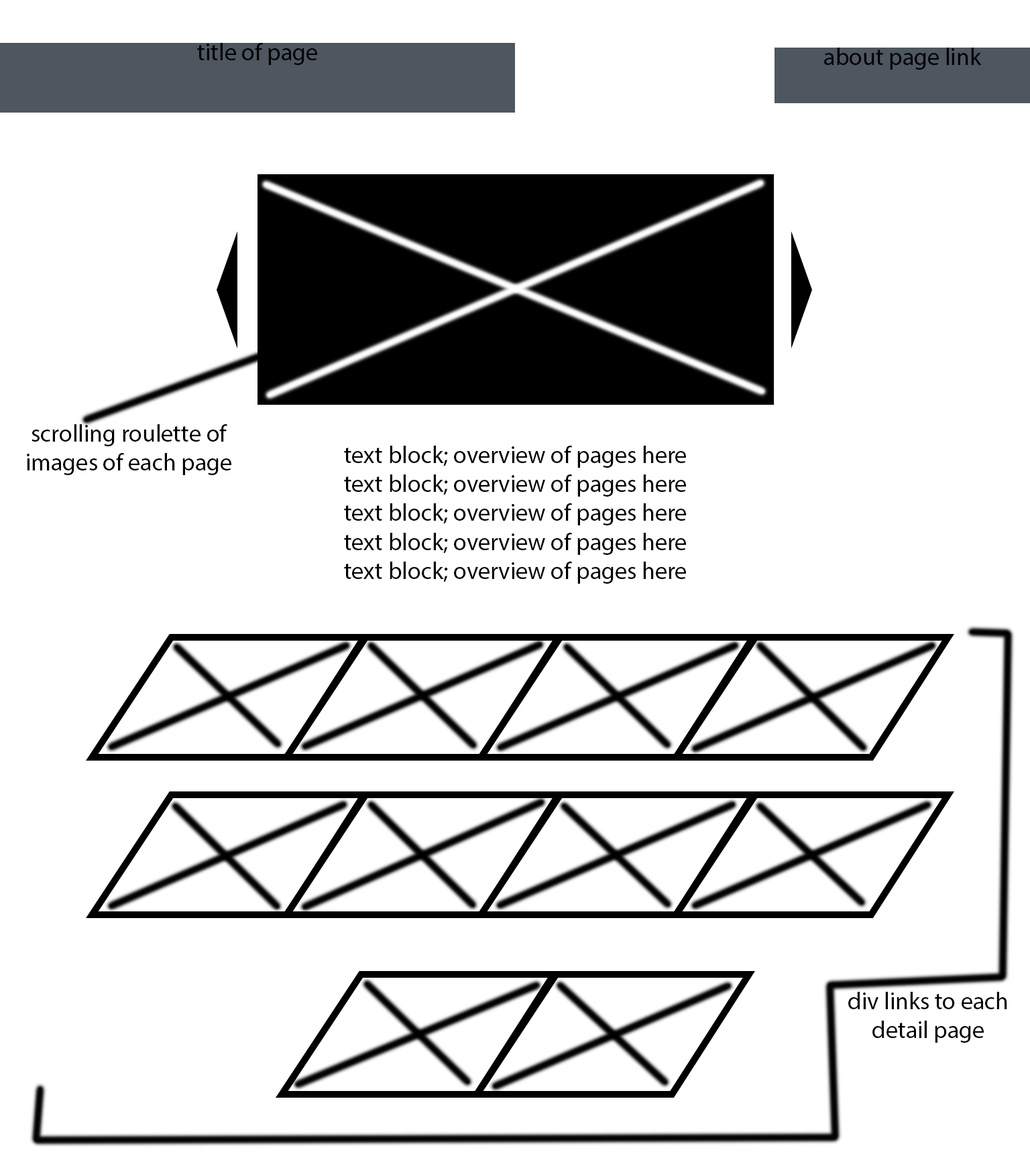
<style>
.page{position:relative;width:1030px;height:1158px;background:#ffffff}
.page>*{position:absolute;margin:0}
.t1{font:24.1px "MyriadPro-Regular";color:#000000}
</style>
<div class="page">
<p class="t1" style="left:197px;top:43px;width:120px;height:22px">title of page</p>
<p class="t1" style="left:824px;top:48px;width:157px;height:22px">about page link</p>
<p class="t1" style="left:27px;top:424px;width:204px;height:51px;text-align:center">scrolling roulette of images of each page</p>
<p class="t1" style="left:344px;top:446px;width:342px;height:138px;text-align:center">text block; overview of pages here<br>text block; overview of pages here<br>text block; overview of pages here<br>text block; overview of pages here<br>text block; overview of pages here</p>
<p class="t1" style="left:848px;top:992px;width:159px;height:51px;text-align:center">div links to each detail page</p>
</div>
